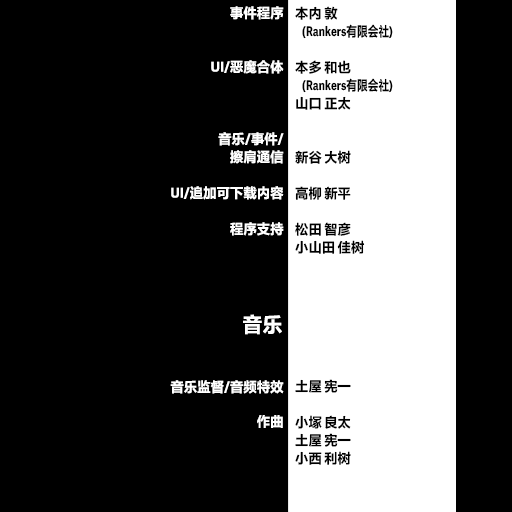
<style>
.page{position:relative;width:512px;height:512px;background:#000000}
.page>*{position:absolute;margin:0}
.t1{font:13.5px/18px "FZLTHProGlobal-Bold";letter-spacing:0.005em;color:#ffffff}
.t2{font:13.5px/34.7px "FZLTHProGlobal-Bold";letter-spacing:0.005em;color:#ffffff}
.t3{font:13.5px/18px "FZLTHProGlobal-Bold";letter-spacing:0.005em;color:#000000}
.t4{font:13.5px/18px "FZLTHProGlobal-Bold";letter-spacing:0.005em;color:#000000;scale:0.79 1}
.t5{font:20.2px "FZLTHProGlobal-Bold";letter-spacing:0.005em;color:#ffffff}
</style>
<div class="page">
<p class="t1" style="left:170px;top:6px;width:114px;height:422px;text-align:right">事件程序<br><br><br>UI/恶魔合体<br><br><br><br>音乐/事件/<br>擦肩通信<br><br>UI/追加可下载内容<br><br>程序支持<br><br><br><br><br><br><br><br><span class="t2">音乐监督/音频特效<br>作曲</span></p>
<p class="t3" style="left:295px;top:6px;width:98px;height:248px">本内 敦<br>   <span class="t4">(Rankers有限会社)<br><br></span>本多 和也<br>   <span class="t4">(Rankers有限会社)<br></span>山口 正太<br><br><br>新谷 大树<br><br>高柳 新平<br><br>松田 智彦<br>小山田 佳树</p>
<p class="t5" style="left:243px;top:314px;width:39px;height:21px">音乐</p>
<p class="t3" style="left:295px;top:379px;width:56px;height:86px">土屋 宪一<br><br>小塚 良太<br>土屋 宪一<br>小西 利树</p>
</div>
